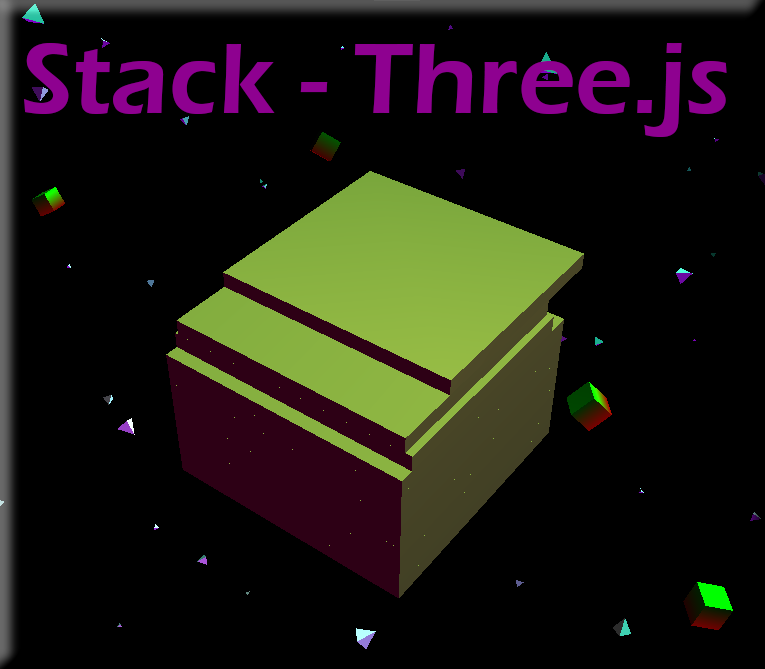
<style>
.page{position:relative;width:765px;height:669px;background:#000000}
.page>*{position:absolute;margin:0}
.t1{font:103.4px "ErasITC-Demi";color:#8e0190}
</style>
<div class="page">
<p class="t1" style="left:24px;top:43px;width:703px;height:94px">Stack - Three.js</p>
</div>
